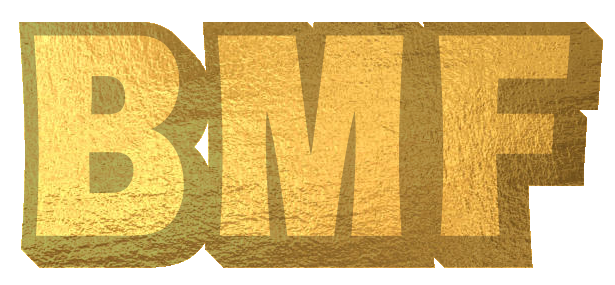
<style>
.page{position:relative;width:615px;height:285px;background:#ffffff}
.page>*{position:absolute;margin:0}
.t1{font:250px "OMNIBLACKOutline"}
</style>
<div class="page">
<p class="t1" style="left:19px;top:22px;width:584px;height:246px">BMF</p>
</div>
